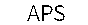
<style>
.page{position:relative;width:88px;height:25px;background:#ffffff}
.page>*{position:absolute;margin:0}
.t1{font:24px "SourceSansRoman-Regular";color:#000000}
</style>
<div class="page">
<p class="t1" style="left:27px;top:5px;width:38px;height:16px">APS</p>
</div>
